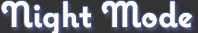
<style>
.page{position:relative;width:198px;height:33px;background:#333333}
.page>*{position:absolute;margin:0}
.t1{font:36px "CoquetteBold";color:#ffffff}
</style>
<div class="page">
<p class="t1" style="left:1px;top:1px;width:192px;height:32px">Night Mode</p>
</div>
